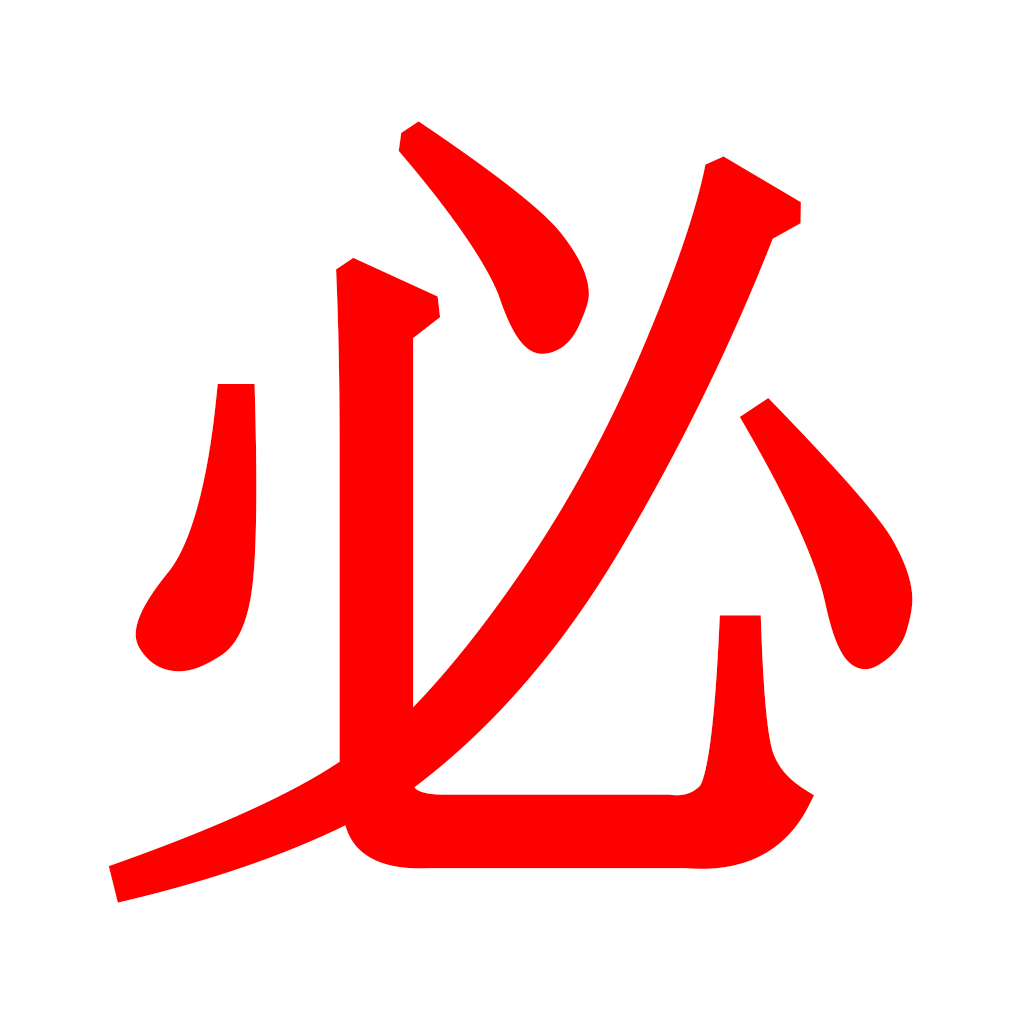
<style>
.page{position:relative;width:1024px;height:1024px;background:#ffffff}
.page>*{position:absolute;margin:0}
.t1{font:900px "SimSun";color:#ff0000;font-weight:bold}
</style>
<div class="page">
<p class="t1" style="left:108px;top:121px;width:805px;height:782px">必</p>
</div>
